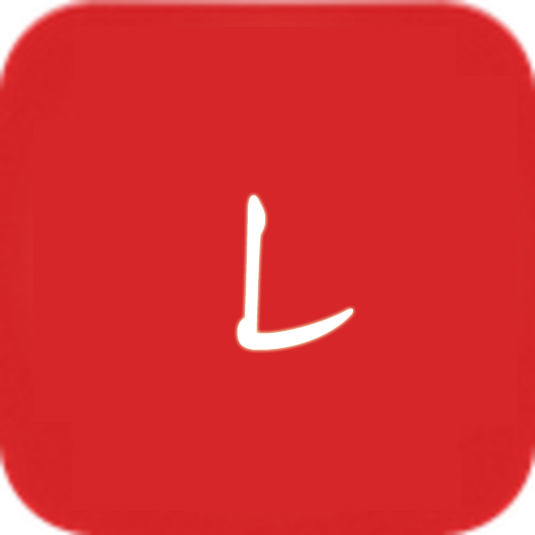
<style>
.page{position:relative;width:535px;height:535px;background:#d62629}
.page>*{position:absolute;margin:0}
.t1{font:220px "SketchFlowPrint";color:#ffffff}
</style>
<div class="page">
<p class="t1" style="left:237px;top:195px;width:116px;height:155px">L</p>
</div>
